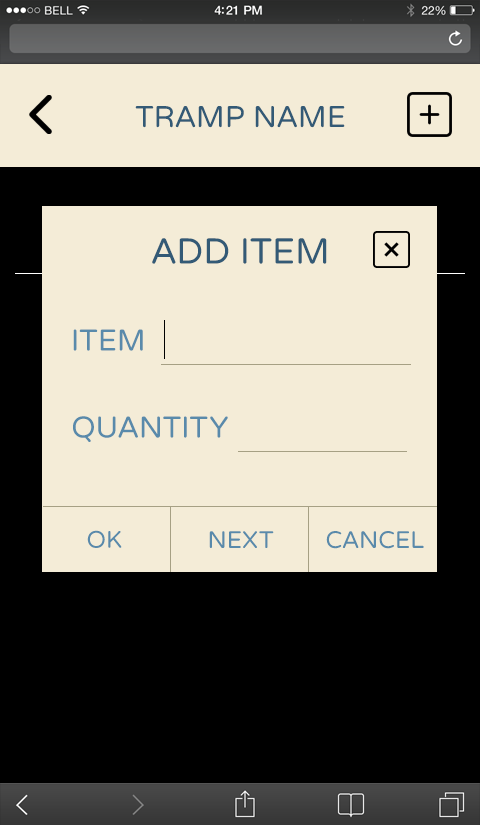
<style>
.page{position:relative;width:480px;height:825px;background:#f4ecd7}
.page>*{position:absolute;margin:0}
.t1{font:30px "VarelaRound-Regular";color:#335a76;text-transform:uppercase}
.t2{font:36px "VarelaRound-Regular";color:#335a76;text-transform:uppercase}
.t3{font:30px "VarelaRound-Regular";color:#598aab;text-transform:uppercase}
.t4{font:24px "VarelaRound-Regular";color:#598aab;text-transform:uppercase}
</style>
<div class="page">
<p class="t1" style="left:135px;top:106px;width:210px;height:22px">TRAMP Name</p>
<p class="t2" style="left:152px;top:238px;width:175px;height:26px">ADD ITEM</p>
<p class="t3" style="left:73px;top:329px;width:70px;height:22px">ITEM</p>
<p class="t3" style="left:73px;top:416px;width:155px;height:26px">QuanTity</p>
<p class="t4" style="left:87px;top:530px;width:35px;height:18px">OK</p>
<p class="t4" style="left:209px;top:531px;width:65px;height:17px">NEXT</p>
<p class="t4" style="left:326px;top:531px;width:98px;height:18px">CANCEL</p>
</div>
